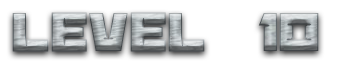
<style>
.page{position:relative;width:364px;height:64px;background:#ffffff}
.page>*{position:absolute;margin:0}
.t1{font:60px "BananaBrick"}
</style>
<div class="page">
<p class="t1" style="left:12px;top:12px;width:307px;height:40px">Level  10</p>
</div>
